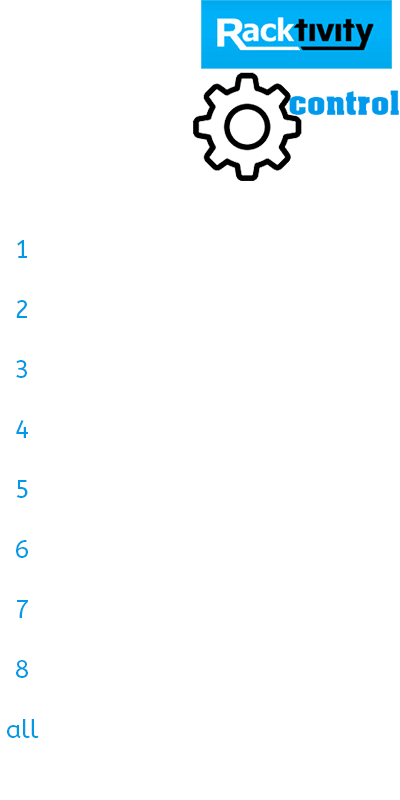
<style>
.page{position:relative;width:400px;height:800px;background:#ffffff}
.page>*{position:absolute;margin:0}
.t1{font:25px "ABeeZee-Regular";color:#009ae6}
</style>
<div class="page">
<p class="t1" style="left:7px;top:240px;width:32px;height:498px;text-align:center">1<br><br>2<br><br>3<br><br>4<br><br>5<br><br>6<br><br>7<br><br>8<br><br>all</p>
</div>
